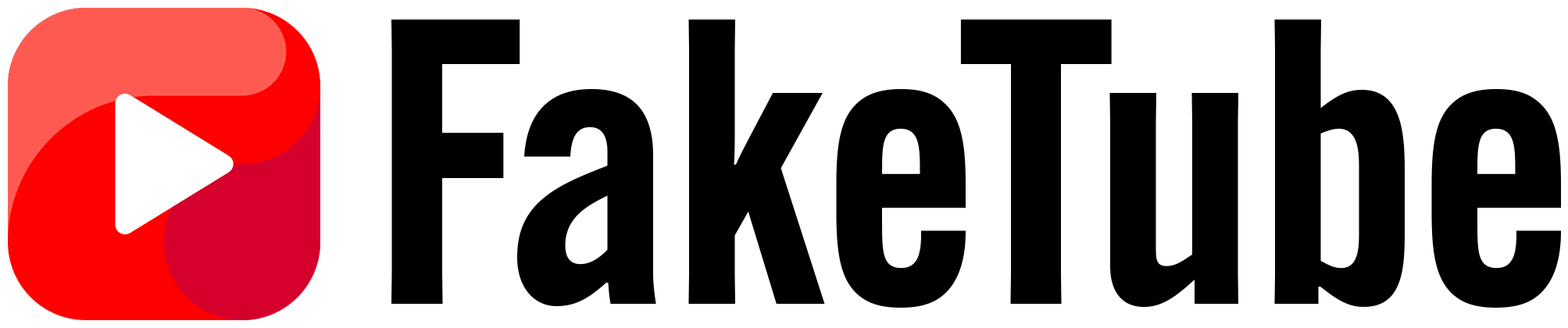
<style>
.page{position:relative;width:1568px;height:328px;background:#ffffff}
.page>*{position:absolute;margin:0}
.t1{font:397.3px "AlternateGothicATF-Demi";color:#000000}
</style>
<div class="page">
<p class="t1" style="left:391px;top:20px;width:1170px;height:288px">FakeTube</p>
</div>
